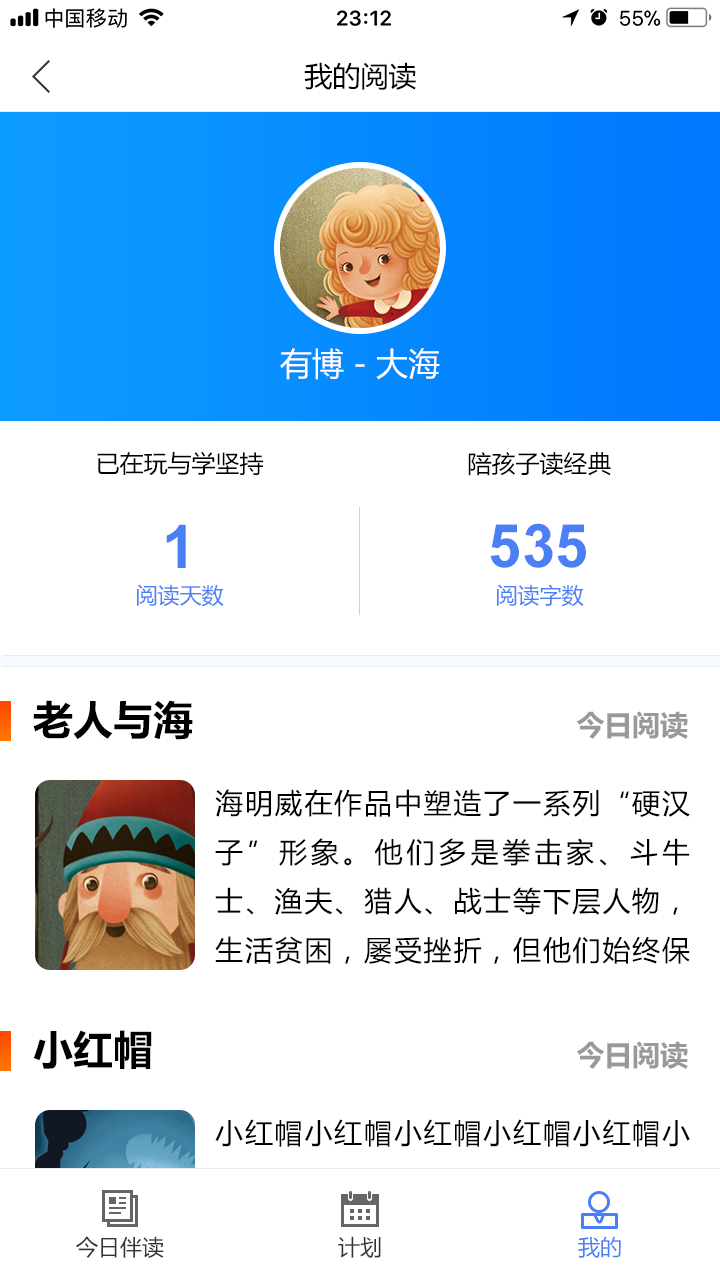
<style>
.page{position:relative;width:720px;height:1280px;background:#ffffff}
.page>*{position:absolute;margin:0}
.t1{font:28px "MicrosoftYaHei";color:#000000}
.t2{font:32px "MicrosoftYaHei";color:#ffffff}
.t3{font:24px "MicrosoftYaHei";color:#000000}
.t4{font:60px "Arial-BoldMT";color:#4b7ff5}
.t5{font:22px "MicrosoftYaHei";color:#4b7ff5}
.t6{font:40px "MicrosoftYaHei-Bold";color:#000000}
.t7{font:28px "MicrosoftYaHei-Bold";color:#999999}
.t8{font:40px "MicrosoftYaHei-Bold";color:#010101}
.t9{font:22px "MicrosoftYaHei";color:#333333}
</style>
<div class="page">
<p class="t1" style="left:304px;top:62px;width:112px;height:28px">我的阅读</p>
<p class="t2" style="left:280px;top:348px;width:160px;height:32px">有博 - 大海</p>
<p class="t3" style="left:97px;top:451px;width:167px;height:25px">已在玩与学坚持</p>
<p class="t3" style="left:468px;top:452px;width:143px;height:24px">陪孩子读经典</p>
<p class="t4" style="left:166px;top:524px;width:20px;height:44px">1</p>
<p class="t4" style="left:490px;top:523px;width:96px;height:45px">535</p>
<p class="t5" style="left:137px;top:584px;width:87px;height:23px">阅读天数</p>
<p class="t5" style="left:497px;top:584px;width:87px;height:23px">阅读字数</p>
<p class="t6" style="left:33px;top:700px;width:160px;height:40px">老人与海</p>
<p class="t7" style="left:576px;top:711px;width:112px;height:28px">今日阅读</p>
<p class="t1" style="left:215px;top:789px;width:475px;height:175px;text-align:justify">海明威在作品中塑造了一系列“硬汉子”形象。他们多是拳击家、斗牛士、渔夫、猎人、战士等下层人物，生活贫困，屡受挫折，但他们始终保持旺盛的生命力和坚强的意志力。</p>
<p class="t8" style="left:33px;top:1030px;width:119px;height:39px">小红帽</p>
<p class="t7" style="left:576px;top:1041px;width:112px;height:28px">今日阅读</p>
<p class="t9" style="left:76px;top:1236px;width:88px;height:22px">今日伴读</p>
<p class="t9" style="left:338px;top:1236px;width:43px;height:22px">计划</p>
<p class="t5" style="left:578px;top:1236px;width:43px;height:22px">我的</p>
</div>
